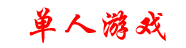
<style>
.page{position:relative;width:186px;height:48px;background:#ffffff}
.page>*{position:absolute;margin:0}
.t1{font:36px "STXingkai";color:#ff0000}
</style>
<div class="page">
<p class="t1" style="left:29px;top:7px;width:137px;height:36px">单人游戏</p>
</div>
